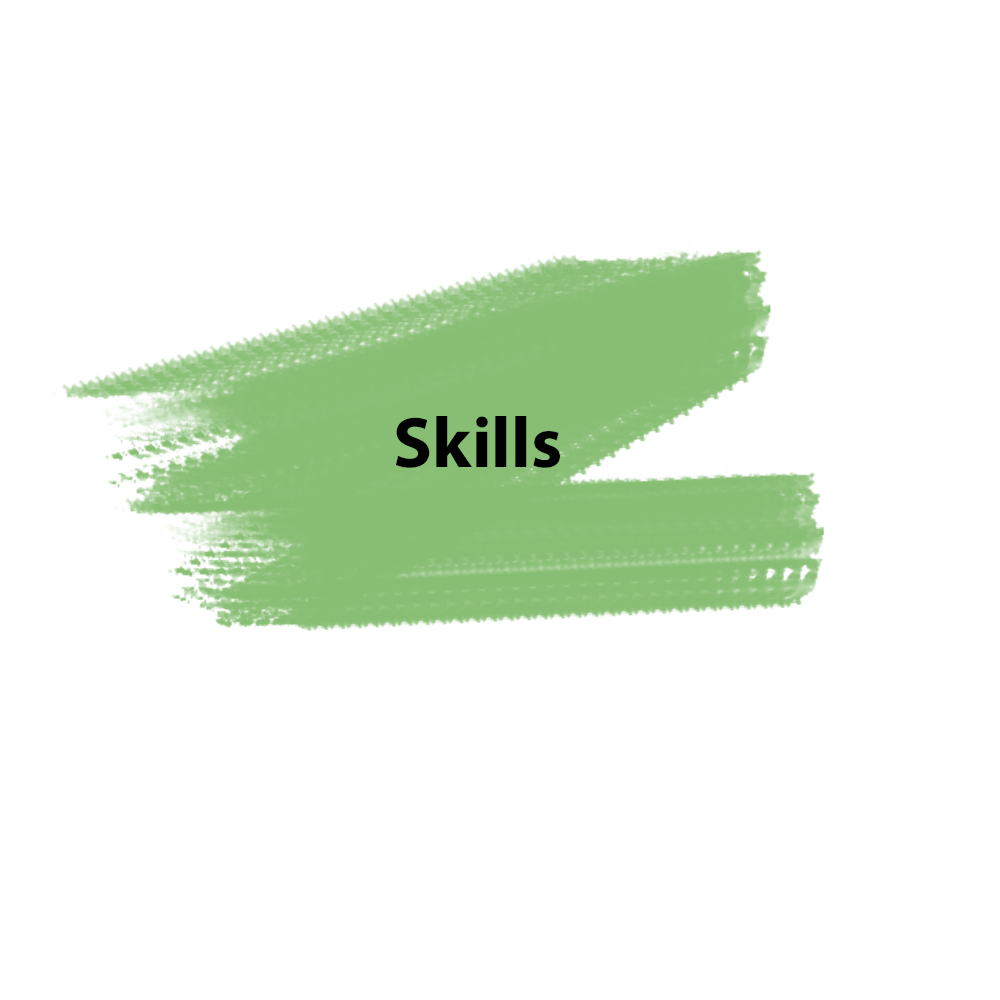
<style>
.page{position:relative;width:1000px;height:1000px;background:#ffffff}
.page>*{position:absolute;margin:0}
.t1{font:72px "MyriadPro-Bold";color:#000000}
</style>
<div class="page">
<p class="t1" style="left:396px;top:416px;width:164px;height:52px">Skills</p>
</div>
